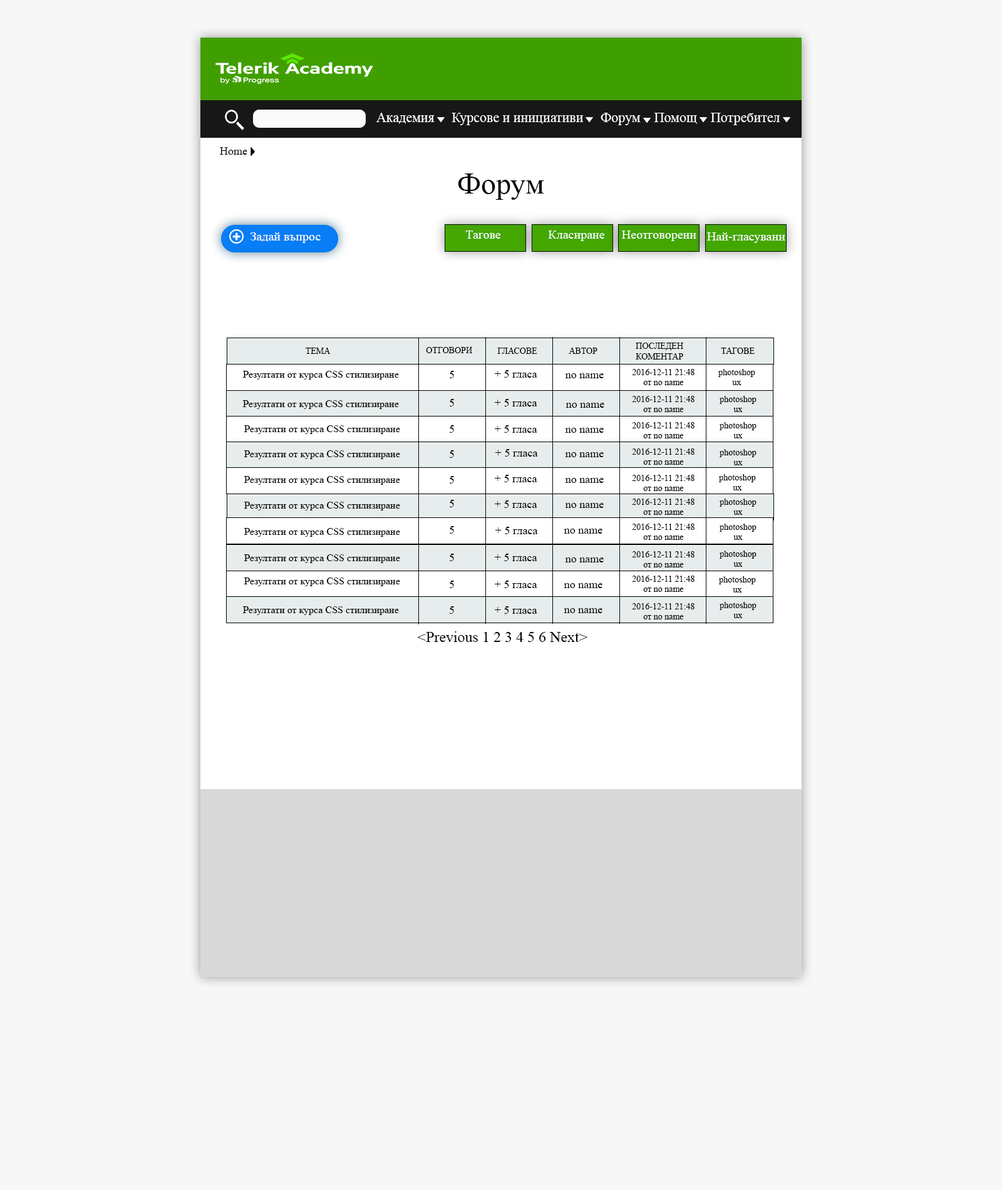
<style>
.page{position:relative;width:1002px;height:1190px;background:#f7f7f7}
.page>*{position:absolute;margin:0}
.t1{font:13.8px "TimesNewRomanPSMT";color:#ffffff}
.t2{font:11.3px "TimesNewRomanPSMT";color:#050505}
.t3{font:30.1px "TimesNewRomanPSMT";color:#050505}
.t4{font:12.5px "TimesNewRomanPSMT";color:#fefdfd}
.t5{font:8.8px "TimesNewRomanPSMT";color:#020202}
.t6{font:10px "TimesNewRomanPSMT";color:#020202}
.t7{font:11.3px "TimesNewRomanPSMT";color:#020202}
.t8{font:15px "TimesNewRomanPSMT";color:#020202}
</style>
<div class="page">
<p class="t1" style="left:376px;top:113px;width:404px;height:12px">Академия     Курсове и инициативи     Форум    Помощ    Потребител</p>
<p class="t2" style="left:220px;top:147px;width:27px;height:8px">Home</p>
<p class="t3" style="left:458px;top:173px;width:86px;height:27px">Форум</p>
<p class="t4" style="left:250px;top:232px;width:71px;height:11px">Задай въпрос</p>
<p class="t4" style="left:465px;top:230px;width:36px;height:9px">Тагове</p>
<p class="t4" style="left:548px;top:230px;width:57px;height:11px">Класиране</p>
<p class="t4" style="left:621px;top:230px;width:75px;height:11px">Неотговорени</p>
<p class="t4" style="left:707px;top:232px;width:78px;height:11px">Най-гласувани</p>
<p class="t5" style="left:306px;top:348px;width:25px;height:6px">TEMA</p>
<p class="t5" style="left:426px;top:347px;width:46px;height:6px">ОТГОВОРИ</p>
<p class="t5" style="left:497px;top:348px;width:40px;height:6px">ГЛАСОВЕ</p>
<p class="t5" style="left:569px;top:348px;width:28px;height:6px">АВТОР</p>
<p class="t5" style="left:636px;top:343px;width:47px;height:16px;text-align:center">ПОСЛЕДЕН КОМЕНТАР</p>
<p class="t5" style="left:721px;top:348px;width:34px;height:6px">ТАГОВЕ</p>
<p class="t6" style="left:243px;top:371px;width:156px;height:9px">Резултати от курса CSS стилизиране</p>
<p class="t7" style="left:450px;top:371px;width:4px;height:7px">5</p>
<p class="t7" style="left:494px;top:370px;width:43px;height:8px">+ 5 гласа</p>
<p class="t7" style="left:565px;top:373px;width:39px;height:5px">no name</p>
<p class="t5" style="left:632px;top:369px;width:63px;height:16px;text-align:center">2016-12-11 21:48<br>от no name</p>
<p class="t5" style="left:718px;top:369px;width:37px;height:16px;text-align:center">photoshop<br>ux</p>
<p class="t6" style="left:243px;top:400px;width:156px;height:9px">Резултати от курса CSS стилизиране</p>
<p class="t7" style="left:450px;top:399px;width:4px;height:7px">5</p>
<p class="t7" style="left:494px;top:399px;width:43px;height:7px">+ 5 гласа</p>
<p class="t5" style="left:632px;top:396px;width:63px;height:16px;text-align:center">2016-12-11 21:48<br>от no name</p>
<p class="t5" style="left:720px;top:396px;width:37px;height:16px;text-align:center">photoshop<br>ux</p>
<p class="t7" style="left:566px;top:403px;width:38px;height:5px">no name</p>
<p class="t6" style="left:244px;top:425px;width:156px;height:9px">Резултати от курса CSS стилизиране</p>
<p class="t7" style="left:450px;top:425px;width:4px;height:8px">5</p>
<p class="t7" style="left:494px;top:425px;width:43px;height:8px">+ 5 гласа</p>
<p class="t5" style="left:632px;top:422px;width:63px;height:16px;text-align:center">2016-12-11 21:48<br>от no name</p>
<p class="t5" style="left:720px;top:422px;width:37px;height:16px;text-align:center">photoshop<br>ux</p>
<p class="t7" style="left:565px;top:428px;width:39px;height:5px">no name</p>
<p class="t7" style="left:495px;top:449px;width:43px;height:8px">+ 5 гласа</p>
<p class="t5" style="left:632px;top:448px;width:63px;height:17px;text-align:center">2016-12-11 21:48<br>от no name</p>
<p class="t5" style="left:720px;top:449px;width:37px;height:16px;text-align:center">photoshop<br>ux</p>
<p class="t6" style="left:244px;top:450px;width:156px;height:9px">Резултати от курса CSS стилизиране</p>
<p class="t7" style="left:450px;top:450px;width:4px;height:8px">5</p>
<p class="t7" style="left:565px;top:452px;width:39px;height:5px">no name</p>
<p class="t6" style="left:244px;top:476px;width:156px;height:9px">Резултати от курса CSS стилизиране</p>
<p class="t7" style="left:450px;top:476px;width:4px;height:8px">5</p>
<p class="t7" style="left:494px;top:475px;width:43px;height:7px">+ 5 гласа</p>
<p class="t7" style="left:565px;top:478px;width:39px;height:5px">no name</p>
<p class="t5" style="left:632px;top:475px;width:63px;height:16px;text-align:center">2016-12-11 21:48<br>от no name</p>
<p class="t5" style="left:719px;top:474px;width:37px;height:16px;text-align:center">photoshop<br>ux</p>
<p class="t6" style="left:244px;top:502px;width:156px;height:8px">Резултати от курса CSS стилизиране</p>
<p class="t7" style="left:450px;top:500px;width:4px;height:7px">5</p>
<p class="t7" style="left:494px;top:500px;width:43px;height:8px">+ 5 гласа</p>
<p class="t7" style="left:565px;top:503px;width:39px;height:5px">no name</p>
<p class="t5" style="left:632px;top:499px;width:63px;height:16px;text-align:center">2016-12-11 21:48<br>от no name</p>
<p class="t5" style="left:720px;top:499px;width:37px;height:16px;text-align:center">photoshop<br>ux</p>
<p class="t6" style="left:244px;top:528px;width:156px;height:9px">Резултати от курса CSS стилизиране</p>
<p class="t7" style="left:450px;top:526px;width:4px;height:8px">5</p>
<p class="t7" style="left:495px;top:527px;width:43px;height:7px">+ 5 гласа</p>
<p class="t7" style="left:564px;top:529px;width:38px;height:5px">no name</p>
<p class="t5" style="left:632px;top:524px;width:63px;height:16px;text-align:center">2016-12-11 21:48<br>от no name</p>
<p class="t5" style="left:720px;top:524px;width:37px;height:16px;text-align:center">photoshop<br>ux</p>
<p class="t6" style="left:244px;top:554px;width:156px;height:9px">Резултати от курса CSS стилизиране</p>
<p class="t7" style="left:450px;top:554px;width:4px;height:7px">5</p>
<p class="t7" style="left:494px;top:554px;width:43px;height:7px">+ 5 гласа</p>
<p class="t7" style="left:565px;top:557px;width:39px;height:5px">no name</p>
<p class="t5" style="left:632px;top:551px;width:63px;height:16px;text-align:center">2016-12-11 21:48<br>от no name</p>
<p class="t5" style="left:720px;top:551px;width:37px;height:16px;text-align:center">photoshop<br>ux</p>
<p class="t6" style="left:244px;top:577px;width:156px;height:9px">Резултати от курса CSS стилизиране</p>
<p class="t7" style="left:450px;top:581px;width:4px;height:7px">5</p>
<p class="t7" style="left:494px;top:581px;width:43px;height:7px">+ 5 гласа</p>
<p class="t5" style="left:632px;top:576px;width:63px;height:16px;text-align:center">2016-12-11 21:48<br>от no name</p>
<p class="t5" style="left:719px;top:576px;width:37px;height:16px;text-align:center">photoshop<br>ux</p>
<p class="t7" style="left:564px;top:583px;width:38px;height:5px">no name</p>
<p class="t5" style="left:632px;top:603px;width:63px;height:16px;text-align:center">2016-12-11 21:48<br>от no name</p>
<p class="t5" style="left:720px;top:602px;width:37px;height:16px;text-align:center">photoshop<br>ux</p>
<p class="t6" style="left:243px;top:606px;width:156px;height:9px">Резултати от курса CSS стилизиране</p>
<p class="t7" style="left:450px;top:606px;width:4px;height:8px">5</p>
<p class="t7" style="left:494px;top:606px;width:43px;height:8px">+ 5 гласа</p>
<p class="t7" style="left:564px;top:608px;width:38px;height:5px">no name</p>
<p class="t8" style="left:418px;top:631px;width:169px;height:12px">&lt;Previous 1 2 3 4 5 6 Next&gt;</p>
</div>
